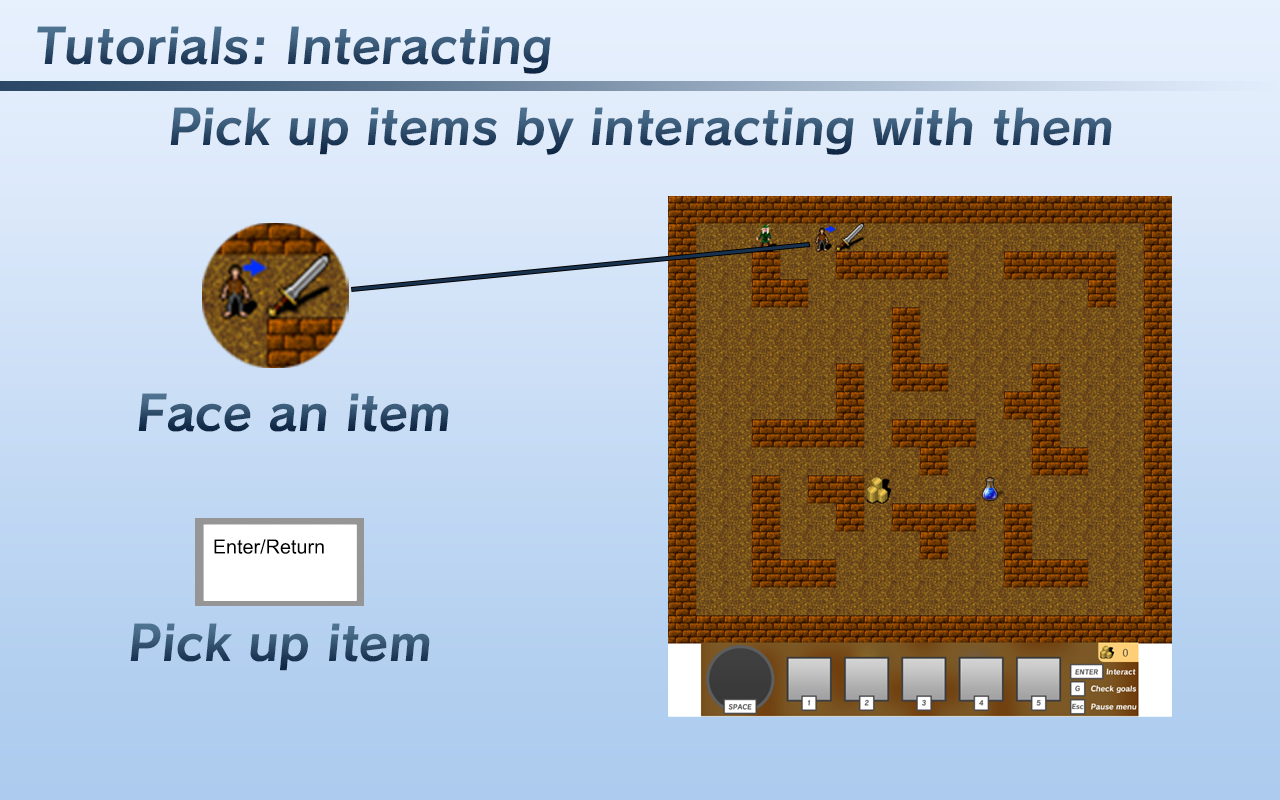
<style>
.page{position:relative;width:1280px;height:800px}
.page>*{position:absolute;margin:0}
.t1{font:48px "Calamity-Bold"}
</style>
<div class="page">
<p class="t1" style="left:37px;top:26px;width:514px;height:48px">Tutorials: Interacting</p>
<p class="t1" style="left:170px;top:107px;width:942px;height:48px">Pick up items by interacting with them</p>
<p class="t1" style="left:138px;top:393px;width:311px;height:39px">Face an item</p>
<p class="t1" style="left:130px;top:623px;width:300px;height:48px">Pick up item</p>
</div>
